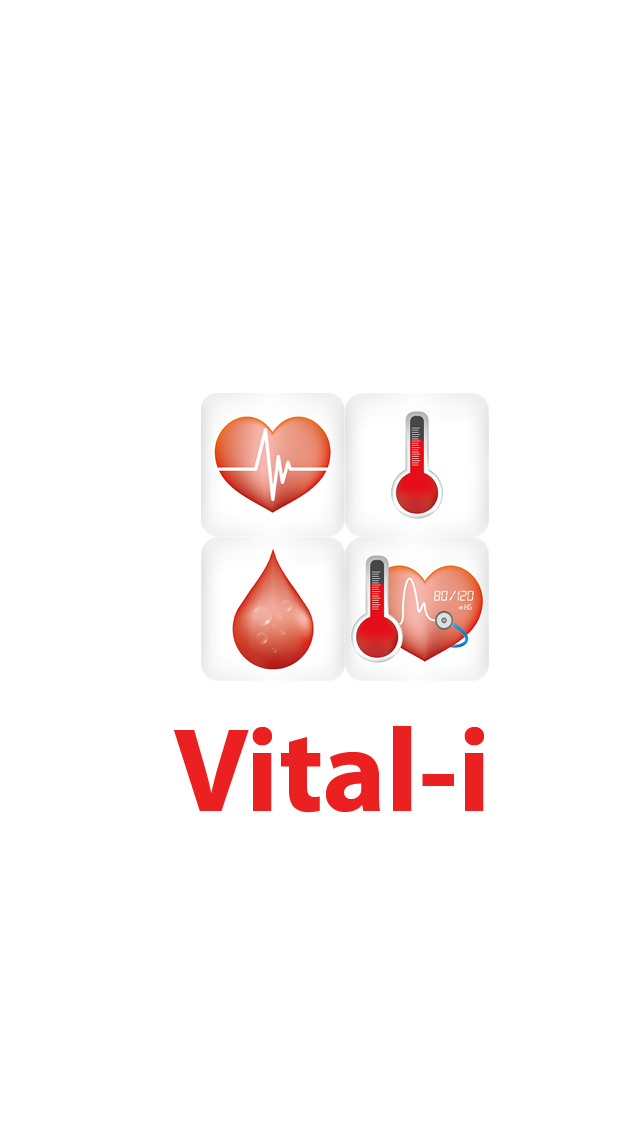
<style>
.page{position:relative;width:640px;height:1136px;background:#ffffff}
.page>*{position:absolute;margin:0}
.t1{font:120px "MyriadPro-Bold";color:#eb2020}
</style>
<div class="page">
<p class="t1" style="left:174px;top:726px;width:310px;height:87px">Vital-i</p>
</div>
